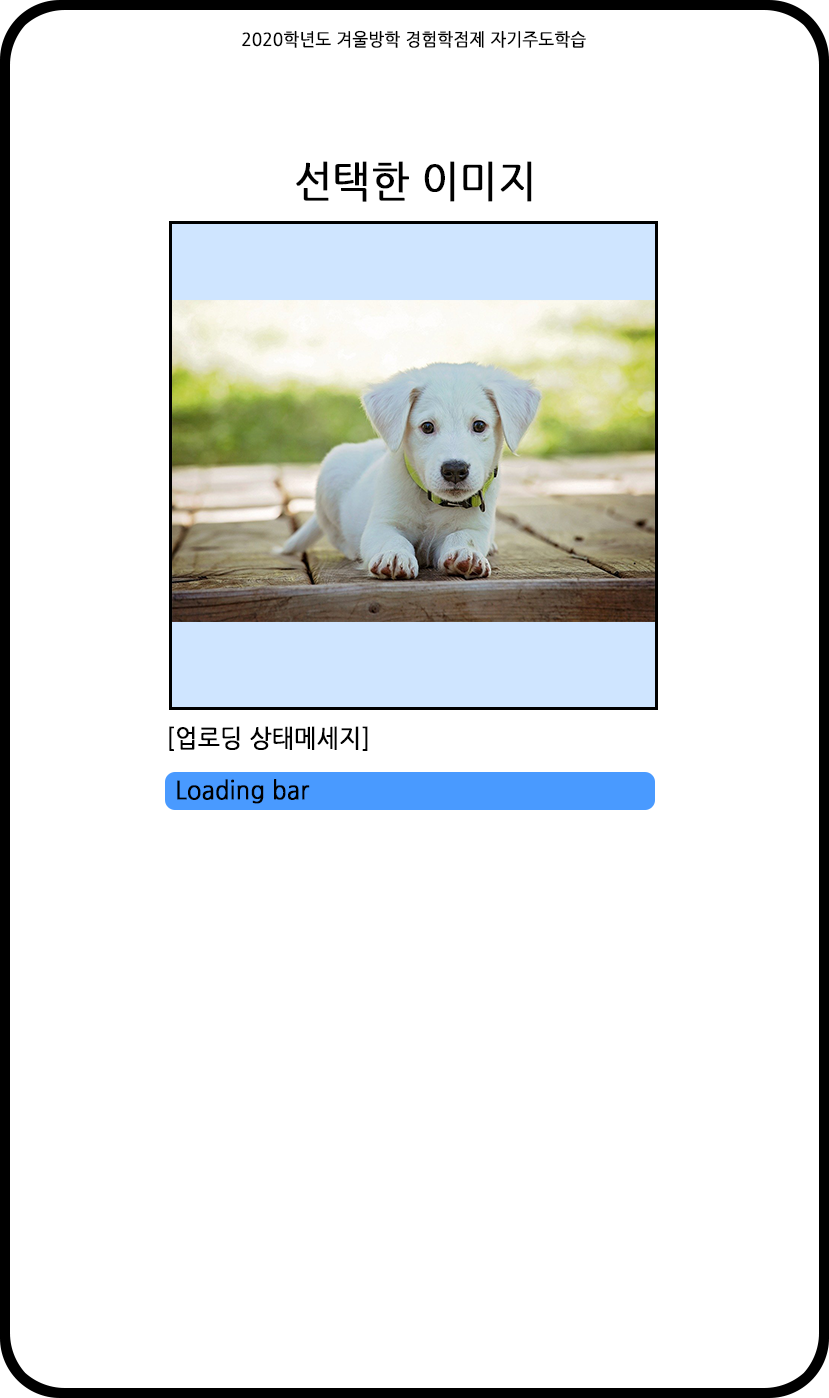
<style>
.page{position:relative;width:829px;height:1398px;background:#ffffff}
.page>*{position:absolute;margin:0}
.t1{font:17.8px "NanumGothic";color:#000000;font-weight:bold;scale:0.93 1}
.t2{font:42.7px "NanumGothic";color:#000000;font-weight:bold;scale:0.93 1}
.t3{font:24.9px "NanumGothic";color:#000000;font-weight:bold;scale:0.93 1}
</style>
<div class="page">
<p class="t1" style="left:242px;top:30px;width:344px;height:18px">2020학년도 겨울방학 경험학점제 자기주도학습</p>
<p class="t2" style="left:296px;top:161px;width:236px;height:41px">선택한 이미지</p>
<p class="t3" style="left:169px;top:726px;width:199px;height:25px">[업로딩 상태메세지]</p>
<p class="t3" style="left:177px;top:779px;width:133px;height:25px">Loading bar</p>
</div>
